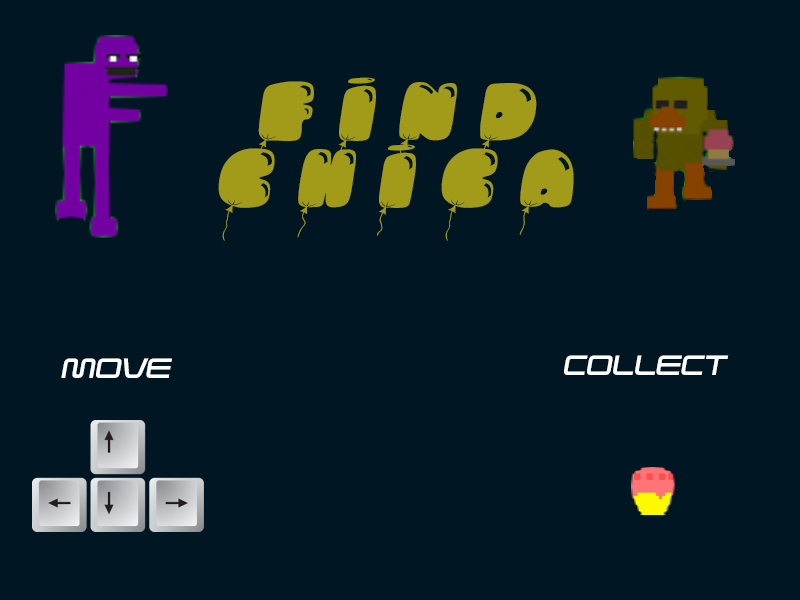
<style>
.page{position:relative;width:800px;height:600px;background:#001723}
.page>*{position:absolute;margin:0}
.t1{font:55.6px "Bumbazoid";color:#a29a19;font-style:italic}
.t2{font:27.8px "SavedByZero-Regular";color:#ffffff;font-style:italic}
</style>
<div class="page">
<p class="t1" style="left:218px;top:77px;width:356px;height:164px;text-align:center">F I N D<br>C H I C A</p>
<p class="t2" style="left:61px;top:358px;width:111px;height:20px">move</p>
<p class="t2" style="left:564px;top:355px;width:165px;height:20px">Collect</p>
</div>
